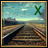
<style>
.page{position:relative;width:48px;height:48px}
.page>*{position:absolute;margin:0}
.t1{font:12px "MicrosoftYaHei";color:#094e0c}
</style>
<div class="page">
<p class="t1" style="left:34px;top:5px;width:8px;height:10px">X</p>
</div>
